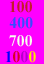
<style>
.page{position:relative;width:44px;height:64px;background:#ff00ff}
.page>*{position:absolute;margin:0}
.t1{font:16px "TimesNewRomanPS-BoldMT";color:#c21c2d}
.t2{font:16px "TimesNewRomanPS-BoldMT";color:#374bff}
.t3{font:16px "TimesNewRomanPS-BoldMT";color:#f7ffee}
.t4{font:16px "TimesNewRomanPS-BoldMT";color:#0000ff}
.t5{font:16px "TimesNewRomanPS-BoldMT";color:#d70025}
.t6{font:16px "TimesNewRomanPS-BoldMT";color:#b600cc}
.t7{font:16px "TimesNewRomanPS-BoldMT";color:#ffe800}
</style>
<div class="page">
<p class="t1" style="left:10px;top:1px;width:22px;height:12px">100</p>
<p class="t2" style="left:9px;top:17px;width:24px;height:12px">400</p>
<p class="t3" style="left:9px;top:35px;width:23px;height:12px">700</p>
<p class="t4" style="left:5px;top:51px;width:31px;height:12px">1<span class="t5">0</span><span class="t6">0</span><span class="t7">0</span></p>
</div>
